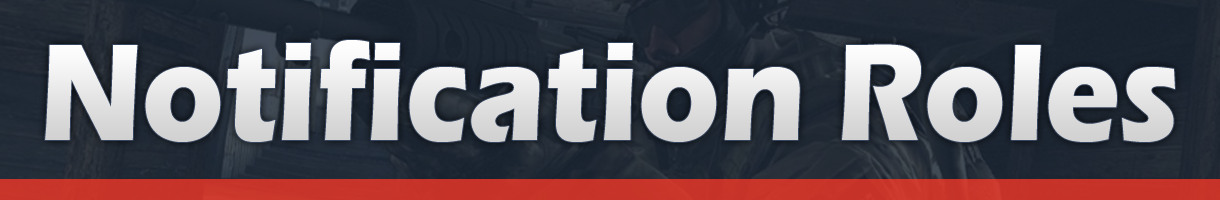
<style>
.page{position:relative;width:1220px;height:200px}
.page>*{position:absolute;margin:0}
.t1{font:143.4px "ErasITC-Bold";color:#e4e4e4;scale:0.88 1}
</style>
<div class="page">
<p class="t1" style="left:45px;top:40px;width:1130px;height:102px">Notification Roles</p>
</div>
